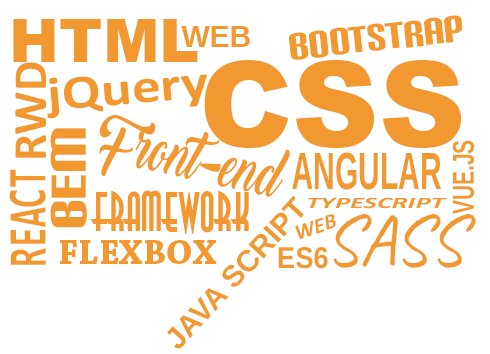
<style>
.page{position:relative;width:490px;height:354px;background:#ffffff}
.page>*{position:absolute;margin:0}
.t1{font:36px "CarbonBl-Regular";color:#f19830;scale:1.13 1}
.t2{font:60px "Arial-Black";color:#f19830}
.t3{font:30px "Arimo-Bold";color:#f19830}
.t4{font:48px "Calibri-Bold";color:#f19830}
.t5{font:120px "Arial-Black";color:#f19830}
.t6{font:48px "Calibri-Bold";color:#f19830;scale:1.2 1}
.t7{font:61.9px "BacktoBlackDemo";color:#f19830;scale:0.7 1}
.t8{font:48px "CarbonBl-Regular";color:#f19830;scale:1.25 1}
.t9{font:30px "Arimo-Bold";color:#f19830;scale:0.7 1}
.t10{font:52.3px "Arimo-Bold";color:#f19830;scale:0.57 1}
.t11{font:54.7px "Consolas-Bold";color:#f19830;scale:0.66 1}
.t12{font:48px "Astrud";color:#f19830}
.t13{font:16px "Calibri-BoldItalic";color:#f19830;scale:1.78 1}
.t14{font:21.8px "Calibri-BoldItalic";color:#f19830}
.t15{font:72px "Caveat-Regular";color:#f19830}
.t16{font:36px "ChaparralPro-Bold";color:#f19830}
.t17{font:30px "Arimo-Bold";color:#f19830;scale:0.9 1}
</style>
<div class="page">
<p class="t1" style="left:289px;top:15px;width:174px;height:45px;rotate:-6deg">BOOTSTRAP</p>
<p class="t2" style="left:13px;top:19px;width:185px;height:43px">HTML</p>
<p class="t3" style="left:181px;top:26px;width:69px;height:21px">WEB</p>
<p class="t4" style="left:15px;top:62px;width:31px;height:96px;rotate:-90deg">RWD</p>
<p class="t5" style="left:204px;top:60px;width:258px;height:88px">CSS</p>
<p class="t6" style="left:47px;top:74px;width:160px;height:45px;rotate:-5deg">jQuery</p>
<p class="t7" style="left:99px;top:115px;width:191px;height:82px;rotate:12deg">Front-end</p>
<p class="t8" style="left:50px;top:128px;width:37px;height:100px;rotate:-90deg">BEM</p>
<p class="t9" style="left:452px;top:140px;width:22px;height:74px;rotate:-90deg">VUE.JS</p>
<p class="t10" style="left:292px;top:152px;width:149px;height:38px">ANGULAR</p>
<p class="t11" style="left:9px;top:169px;width:37px;height:96px;rotate:-90deg">REACT</p>
<p class="t12" style="left:90px;top:190px;width:159px;height:44px">FRAMEWORK</p>
<p class="t3" style="left:167px;top:196px;width:137px;height:153px;rotate:-47deg">JAVA SCRIPT</p>
<p class="t13" style="left:308px;top:197px;width:139px;height:12px">TYPESCRIPT</p>
<p class="t14" style="left:295px;top:214px;width:41px;height:25px;rotate:-18deg">WEB</p>
<p class="t15" style="left:333px;top:214px;width:143px;height:54px">SASS</p>
<p class="t16" style="left:60px;top:240px;width:157px;height:24px">FLEXBOX</p>
<p class="t17" style="left:278px;top:247px;width:50px;height:22px">ES6</p>
</div>
